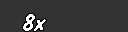
<style>
.page{position:relative;width:128px;height:32px;background:#333333}
.page>*{position:absolute;margin:0}
.t1{font:26px "DomDiagonalBT-Regular";color:#ffffff;scale:1.1 1}
</style>
<div class="page">
<p class="t1" style="left:23px;top:14px;width:23px;height:17px">8x</p>
</div>
